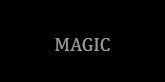
<style>
.page{position:relative;width:165px;height:82px;background:#000000}
.page>*{position:absolute;margin:0}
.t1{font:19.1px "Cambria";color:#999999}
</style>
<div class="page">
<p class="t1" style="left:55px;top:38px;width:55px;height:13px">MAGIC</p>
</div>
